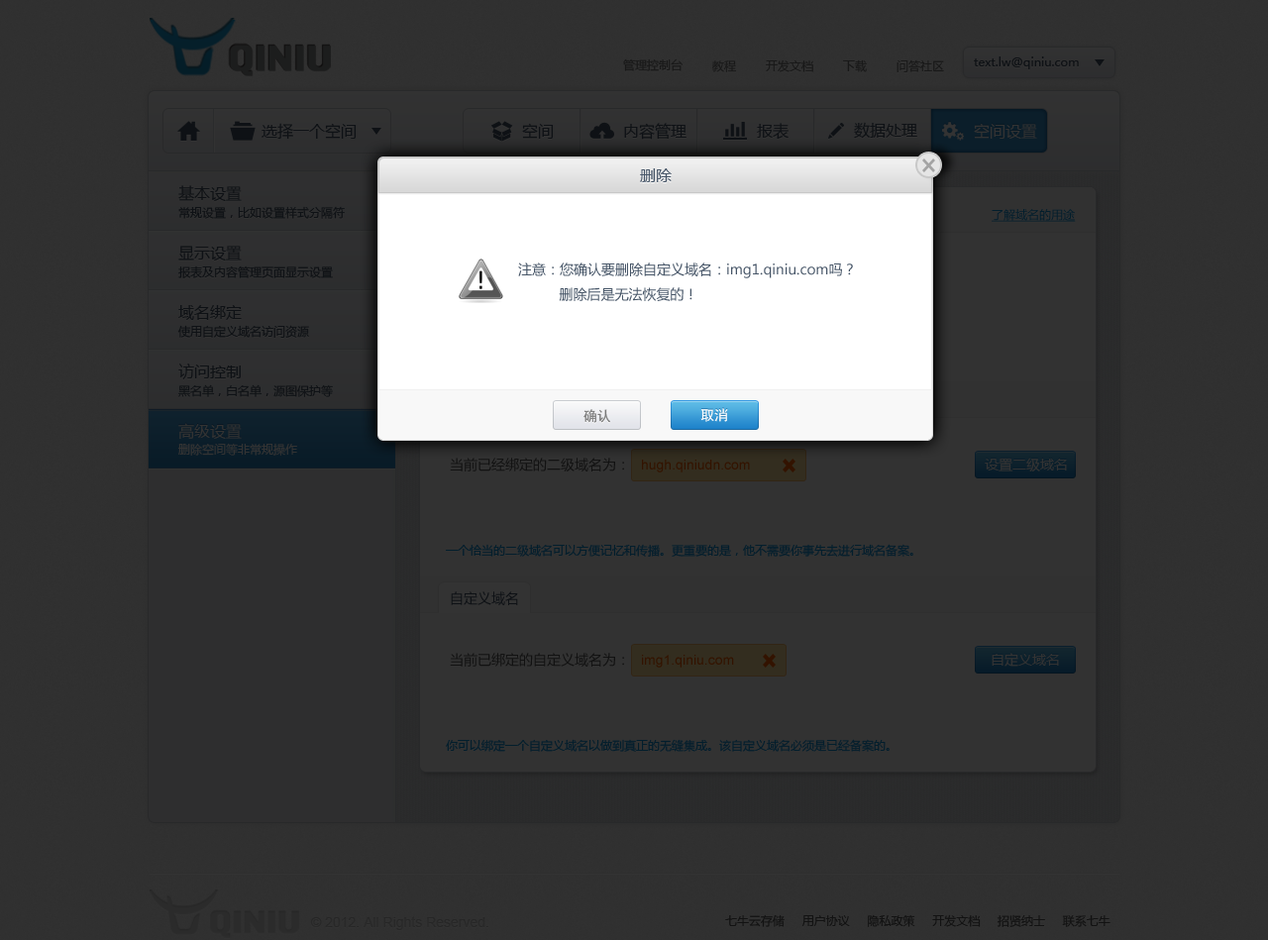
<style>
.page{position:relative;width:1268px;height:940px;background:#303030}
.page>*{position:absolute;margin:0}
.t1{font:11.9px "MicrosoftYaHei";color:#181818}
.t2{font:11.9px "MicrosoftYaHei";color:#0e1115}
.t3{font:15.9px "MicrosoftYaHei";color:#0e1115}
.t4{font:15.9px "MicrosoftYaHei";color:#333333}
.t5{font:15.9px "MicrosoftYaHei";color:#465567}
.t6{font:11.9px "MicrosoftYaHei";color:#021e2c;text-decoration:underline}
.t7{font:13.9px "MicrosoftYaHei";color:#465567}
.t8{font:13.9px "SimHei";color:#787878}
.t9{font:13.9px "SimHei";color:#ffffff}
.t10{font:11.9px "MicrosoftYaHei";color:#333333}
.t11{font:13.9px "MicrosoftYaHei";color:#121212}
.t12{font:13.9px "ArialMT";color:#331300}
.t13{font:13.9px "MicrosoftYaHei";color:#333333}
.t14{font:11.9px "MicrosoftYaHei";color:#021e2c}
.t15{font:13.9px "MicrosoftYaHei";color:#0e1115}
.t16{font:13.9px "ArialMT";color:#212121}
.t17{font:11.9px "MicrosoftYaHei";color:#121212}
</style>
<div class="page">
<p class="t1" style="left:623px;top:58px;width:60px;height:13px">管理控制台</p>
<p class="t1" style="left:712px;top:60px;width:25px;height:12px">教程</p>
<p class="t1" style="left:766px;top:59px;width:47px;height:13px">开发文档</p>
<p class="t1" style="left:843px;top:59px;width:24px;height:13px">下载</p>
<p class="t1" style="left:897px;top:59px;width:47px;height:13px">问答社区</p>
<p class="t2" style="left:974px;top:56px;width:105px;height:13px">text.lw@qiniu.com</p>
<p class="t3" style="left:262px;top:123px;width:95px;height:17px">选择一个空间</p>
<p class="t3" style="left:522px;top:123px;width:32px;height:16px">空间</p>
<p class="t3" style="left:624px;top:123px;width:63px;height:17px">内容管理</p>
<p class="t3" style="left:757px;top:123px;width:32px;height:17px">报表</p>
<p class="t3" style="left:854px;top:122px;width:63px;height:17px">数据处理</p>
<p class="t4" style="left:974px;top:123px;width:63px;height:16px">空间设置</p>
<p class="t5" style="left:640px;top:168px;width:32px;height:14px">删除</p>
<p class="t3" style="left:178px;top:185px;width:64px;height:16px">基本设置</p>
<p class="t2" style="left:178px;top:206px;width:167px;height:13px">常规设置，比如设置样式分隔符</p>
<p class="t6" style="left:992px;top:209px;width:84px;height:13px">了解域名的用途</p>
<p class="t3" style="left:178px;top:246px;width:64px;height:15px">显示设置</p>
<p class="t2" style="left:178px;top:266px;width:155px;height:12px">报表及内容管理页面显示设置</p>
<p class="t7" style="left:518px;top:263px;width:335px;height:38px">注意：您确认要删除自定义域名：img1.qiniu.com吗？<br>          删除后是无法恢复的！</p>
<p class="t3" style="left:178px;top:305px;width:64px;height:15px">域名绑定</p>
<p class="t2" style="left:177px;top:325px;width:132px;height:13px">使用自定义域名访问资源</p>
<p class="t3" style="left:178px;top:364px;width:63px;height:15px">访问控制</p>
<p class="t2" style="left:178px;top:384px;width:155px;height:13px">黑名单，白名单，源图保护等</p>
<p class="t8" style="left:584px;top:409px;width:26px;height:14px">确认</p>
<p class="t9" style="left:700px;top:408px;width:28px;height:14px">取消</p>
<p class="t4" style="left:178px;top:423px;width:64px;height:16px">高级设置</p>
<p class="t10" style="left:178px;top:443px;width:119px;height:13px">删除空间等非常规操作</p>
<p class="t11" style="left:450px;top:458px;width:174px;height:14px">当前已经绑定的二级域名为：</p>
<p class="t12" style="left:642px;top:460px;width:108px;height:13px">hugh.qiniudn.com</p>
<p class="t13" style="left:985px;top:458px;width:82px;height:14px">设置二级域名</p>
<p class="t14" style="left:446px;top:544px;width:468px;height:13px">一个恰当的二级域名可以方便记忆和传播。更重要的是，他不需要你事先去进行域名备案。</p>
<p class="t15" style="left:451px;top:591px;width:67px;height:14px">自定义域名</p>
<p class="t11" style="left:450px;top:653px;width:174px;height:14px">当前已绑定的自定义域名为：</p>
<p class="t13" style="left:992px;top:653px;width:67px;height:14px">自定义域名</p>
<p class="t12" style="left:642px;top:655px;width:92px;height:13px">img1.qiniu.com</p>
<p class="t14" style="left:446px;top:739px;width:444px;height:13px">你可以绑定一个自定义域名以做到真正的无缝集成。该自定义域名必须是已经备案的。</p>
<p class="t16" style="left:310px;top:916px;width:178px;height:14px">© 2012. All Rights Reserved.</p>
<p class="t17" style="left:725px;top:914px;width:386px;height:13px">七牛云存储     用户协议     隐私政策     开发文档     招贤纳士     联系七牛</p>
</div>
